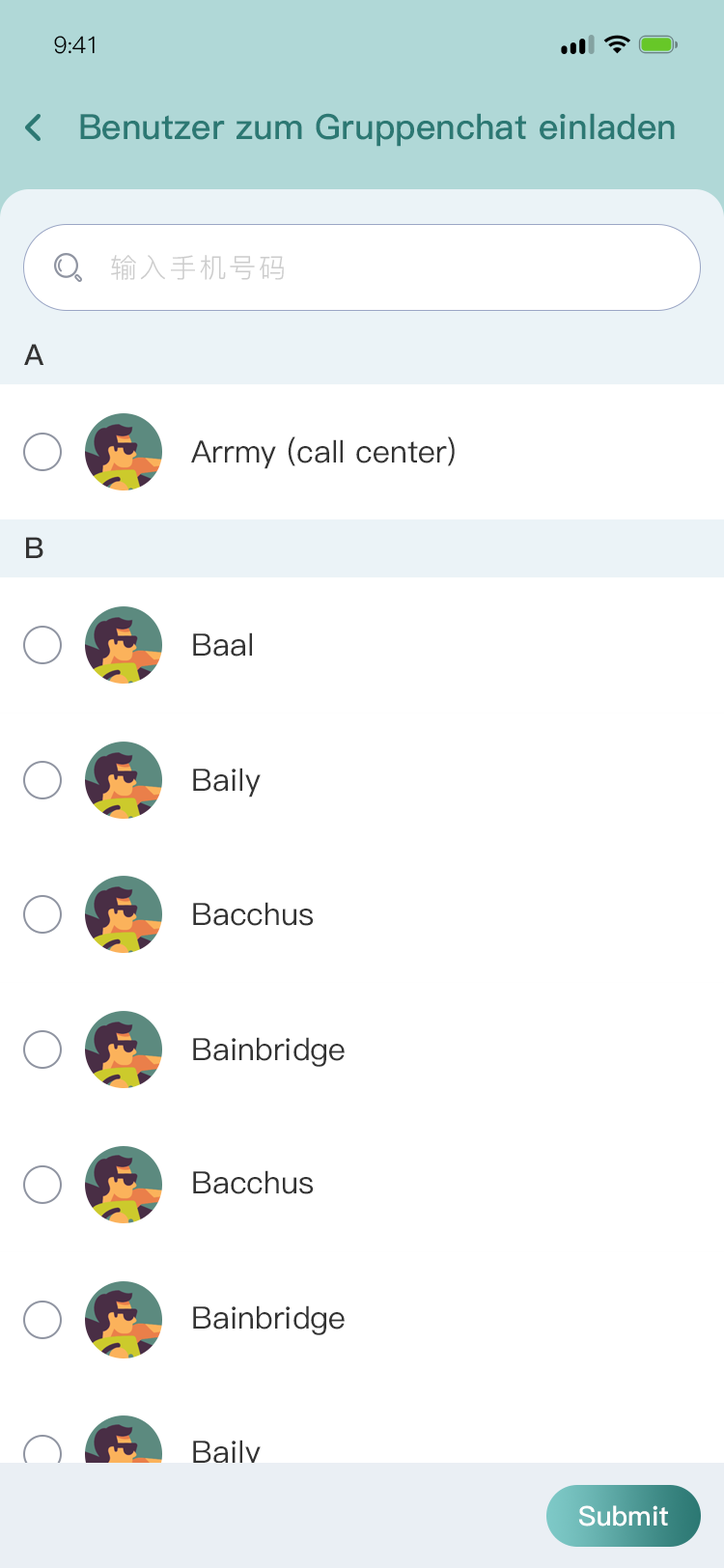
<style>
.page{position:relative;width:724px;height:1568px;background:#ffffff}
.page>*{position:absolute;margin:0}
.t1{font:23.2px "PingFang-SC-Regular";letter-spacing:-0.025em;color:#000000}
.t2{font:34.8px "PingFang-SC-Bold";color:#2c7873}
.t3{font:27px "PingFang-SC-Regular";letter-spacing:0.1em;color:#cccccc}
.t4{font:28.9px "PingFang-SC-Bold";letter-spacing:-0.04em;color:#333333}
.t5{font:30.9px "PingFang-SC-Medium";color:#333333}
.t6{font:27px "PingFang-SC-Bold";color:#ffffff}
</style>
<div class="page">
<p class="t1" style="left:54px;top:36px;width:41px;height:18px">9:41</p>
<p class="t2" style="left:80px;top:113px;width:595px;height:34px">Benutzer zum Gruppenchat einladen</p>
<p class="t3" style="left:111px;top:255px;width:173px;height:25px">输入手机号码</p>
<p class="t4" style="left:24px;top:344px;width:20px;height:21px">A</p>
<p class="t5" style="left:191px;top:436px;width:264px;height:33px">Arrmy (call center)</p>
<p class="t4" style="left:26px;top:537px;width:17px;height:21px">B</p>
<p class="t5" style="left:193px;top:632px;width:59px;height:25px">Baal</p>
<p class="t5" style="left:193px;top:768px;width:68px;height:30px">Baily</p>
<p class="t5" style="left:193px;top:902px;width:121px;height:24px">Bacchus</p>
<p class="t5" style="left:193px;top:1037px;width:152px;height:30px">Bainbridge</p>
<p class="t5" style="left:193px;top:1170px;width:121px;height:24px">Bacchus</p>
<p class="t5" style="left:193px;top:1305px;width:152px;height:30px">Bainbridge</p>
<p class="t5" style="left:193px;top:1440px;width:68px;height:30px">Baily</p>
<p class="t6" style="left:578px;top:1505px;width:90px;height:21px">Submit</p>
</div>
